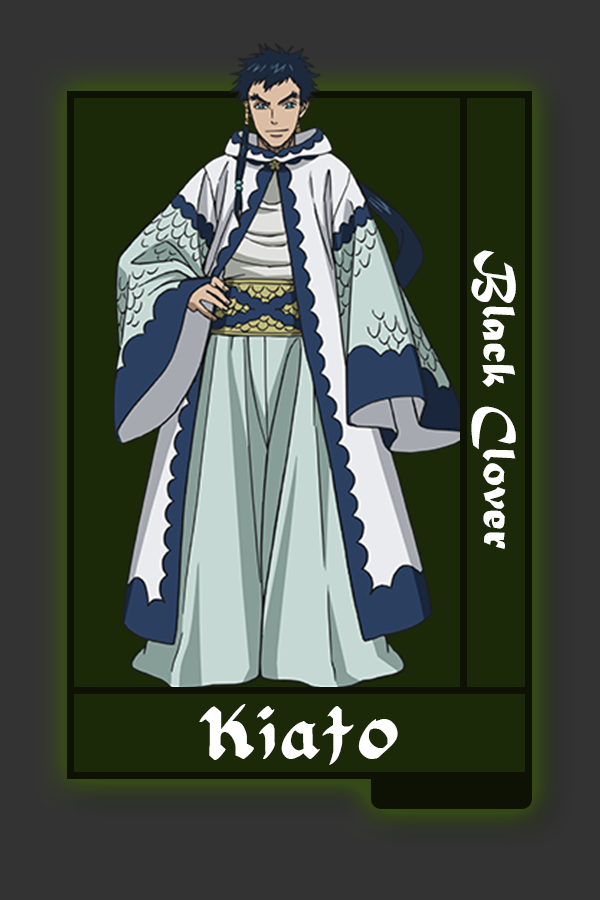
<style>
.page{position:relative;width:600px;height:900px;background:#1b2908}
.page>*{position:absolute;margin:0}
.t1{font:48.8px "MaturaMTScriptCapitals";color:#ffffff}
.t2{font:64.6px "FloranteatLaura";color:#ffffff}
</style>
<div class="page">
<p class="t1" style="left:471px;top:250px;width:45px;height:299px;rotate:90deg">Black Clover</p>
<p class="t2" style="left:199px;top:704px;width:199px;height:61px">Kiato</p>
</div>
